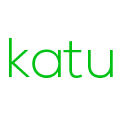
<style>
.page{position:relative;width:122px;height:124px;background:#ffffff}
.page>*{position:absolute;margin:0}
.t1{font:55.5px "NexaLight";color:#00c212}
</style>
<div class="page">
<p class="t1" style="left:9px;top:38px;width:104px;height:40px">katu</p>
</div>
